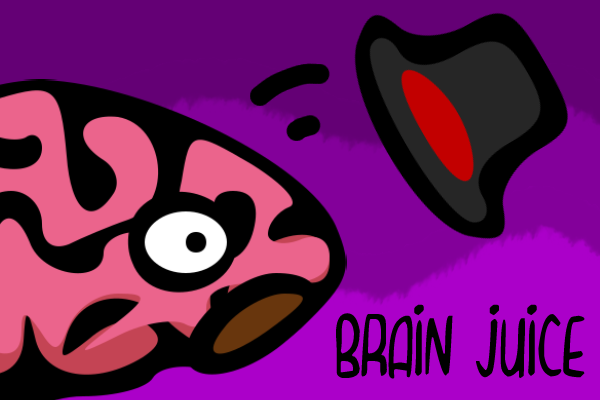
<style>
.page{position:relative;width:600px;height:400px;background:#000000}
.page>*{position:absolute;margin:0}
.t1{font:72px "CurvyThins";color:#000000}
</style>
<div class="page">
<p class="t1" style="left:335px;top:304px;width:250px;height:76px">brain juice</p>
</div>
